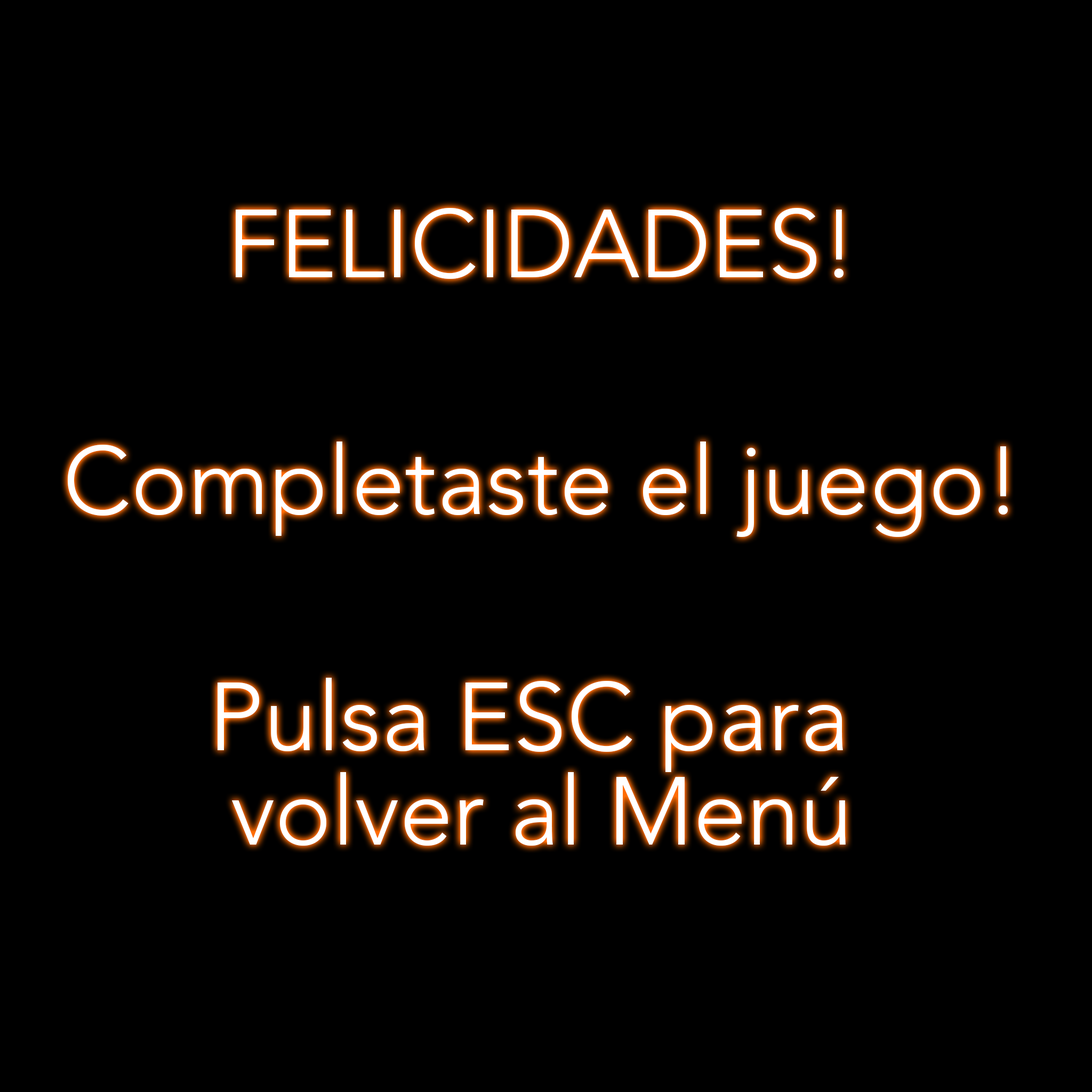
<style>
.page{position:relative;width:1092px;height:1092px;background:#000000}
.page>*{position:absolute;margin:0}
.t1{font:96px/47.3px "AvenirLTStd-Light";color:#ffffff}
</style>
<div class="page">
<p class="t1" style="left:68px;top:208px;width:940px;height:638px;text-align:center">FELICIDADES!<br><br><br><br><br>Completaste el juego!<br><br><br><br><br>Pulsa ESC para <br><br>volver al Menú</p>
</div>
